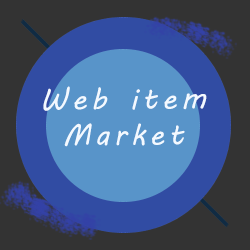
<style>
.page{position:relative;width:250px;height:250px;background:#333333}
.page>*{position:absolute;margin:0}
.t1{font:30px "MVBoli";letter-spacing:0.14em;color:#f3f9ff}
</style>
<div class="page">
<p class="t1" style="left:43px;top:86px;width:164px;height:61px;text-align:center">Web item<br>Market</p>
</div>
